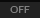
<style>
.page{position:relative;width:40px;height:18px;background:#222222}
.page>*{position:absolute;margin:0}
.t1{font:10px "Lato-Regular";letter-spacing:0.01em;color:#7f7f7f}
</style>
<div class="page">
<p class="t1" style="left:10px;top:6px;width:20px;height:7px">OFF</p>
</div>
